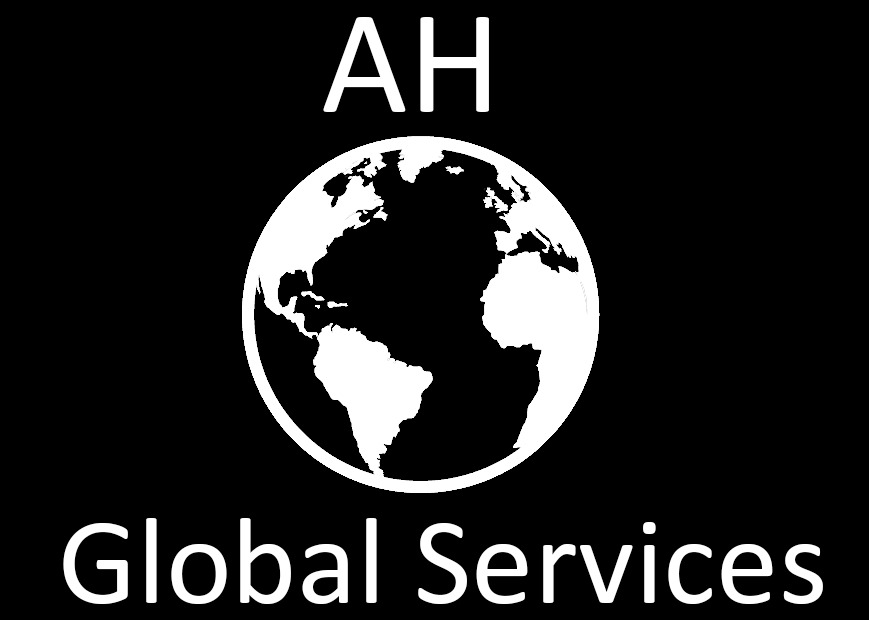
<style>
.page{position:relative;width:869px;height:620px;background:#000000}
.page>*{position:absolute;margin:0}
.t1{font:150px "Calibri";color:#ffffff}
.t2{font:125px "Calibri";color:#ffffff}
</style>
<div class="page">
<p class="t1" style="left:323px;top:17px;width:166px;height:95px">AH</p>
<p class="t2" style="left:63px;top:518px;width:760px;height:86px">Global Services</p>
</div>
